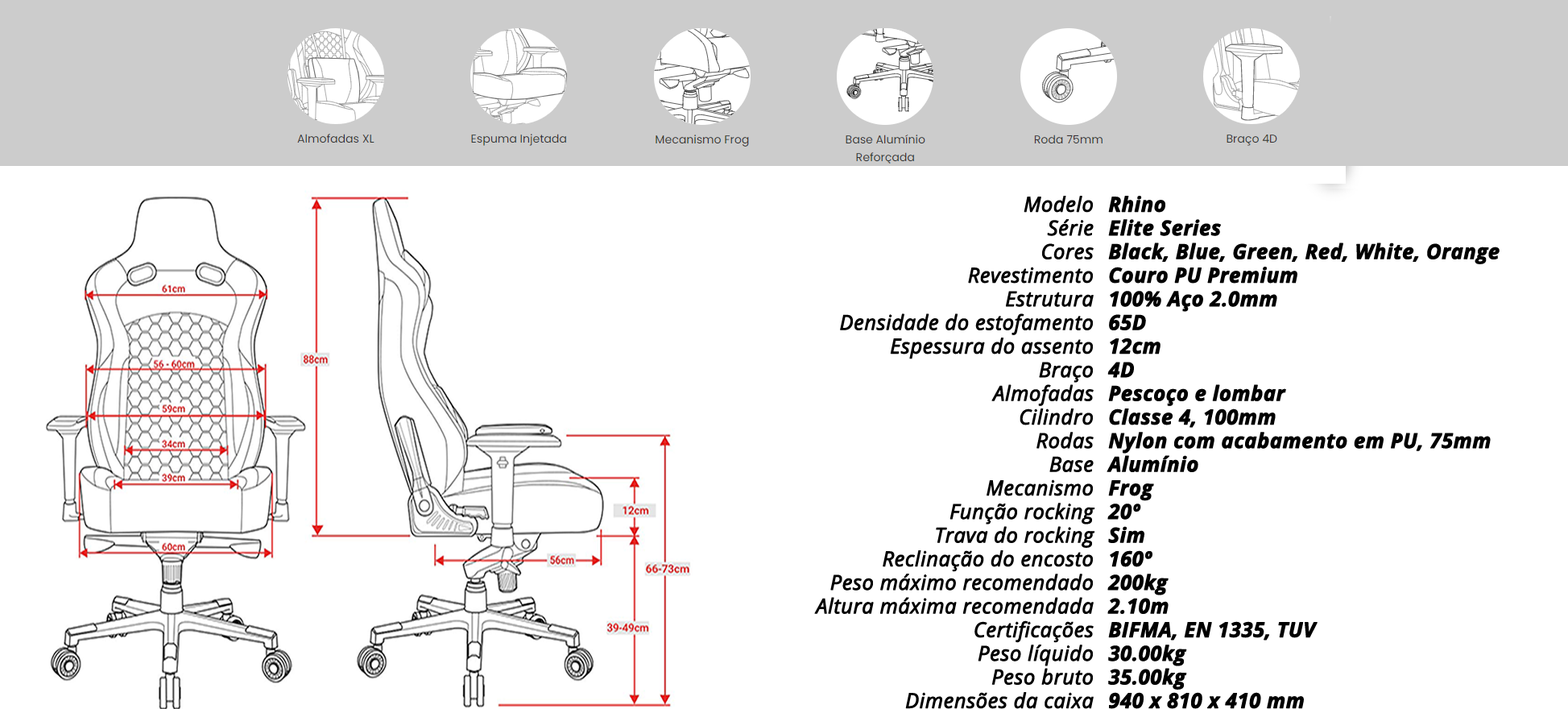
<style>
.page{position:relative;width:1568px;height:709px;background:#ffffff}
.page>*{position:absolute;margin:0}
.t1{font:20.4px/23.6px "OpenSans-Italic";letter-spacing:0.001em;color:#000000;font-weight:bold}
.t2{font:20.4px/23.6px "OpenSans-BoldItalic";letter-spacing:0.001em;color:#000000;font-weight:bold}
</style>
<div class="page">
<p class="t1" style="left:814px;top:196px;width:281px;height:513px;text-align:right">Modelo<br>Série<br>Cores<br>Revestimento<br>Estrutura<br>Densidade do estofamento<br>Espessura do assento<br>Braço<br>Almofadas<br>Cilindro<br>Rodas<br>Base<br>Mecanismo<br>Função rocking<br>Trava do rocking<br>Reclinação do encosto<br>Peso máximo recomendado<br>Altura máxima recomendada<br>Certificações<br>Peso líquido<br>Peso bruto<br>Dimensões da caixa</p>
<p class="t2" style="left:1107px;top:196px;width:393px;height:513px">Rhino<br>Elite Series<br>Black, Blue, Green, Red, White, Orange<br>Couro PU Premium<br>100% Aço 2.0mm<br>65D<br>12cm<br>4D<br>Pescoço e lombar<br>Classe 4, 100mm<br>Nylon com acabamento em PU, 75mm<br>Alumínio<br>Frog<br>20º<br>Sim<br>160º<br>200kg<br>2.10m<br>BIFMA, EN 1335, TUV<br>30.00kg<br>35.00kg<br>940 x 810 x 410 mm</p>
</div>
